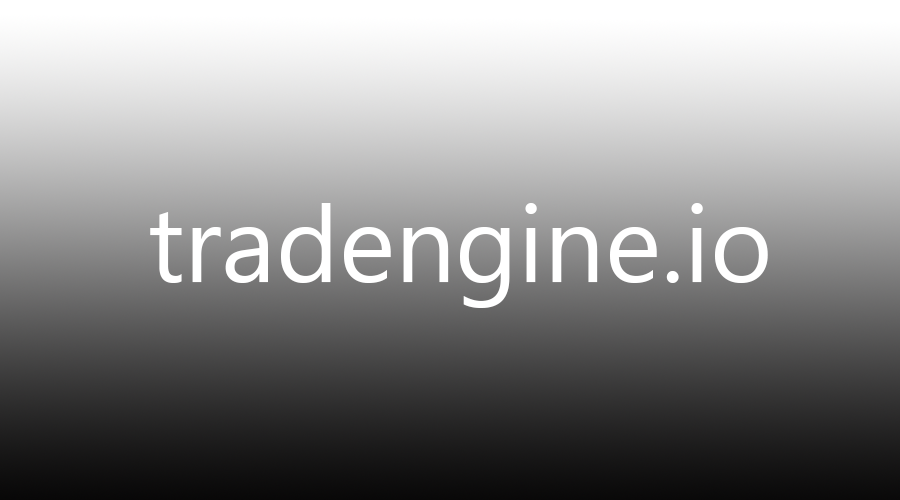
<style>
.page{position:relative;width:900px;height:500px}
.page>*{position:absolute;margin:0}
.t1{font:107px "SegoeUI";color:#ffffff}
</style>
<div class="page">
<p class="t1" style="left:150px;top:203px;width:618px;height:105px">tradengine.io</p>
</div>
